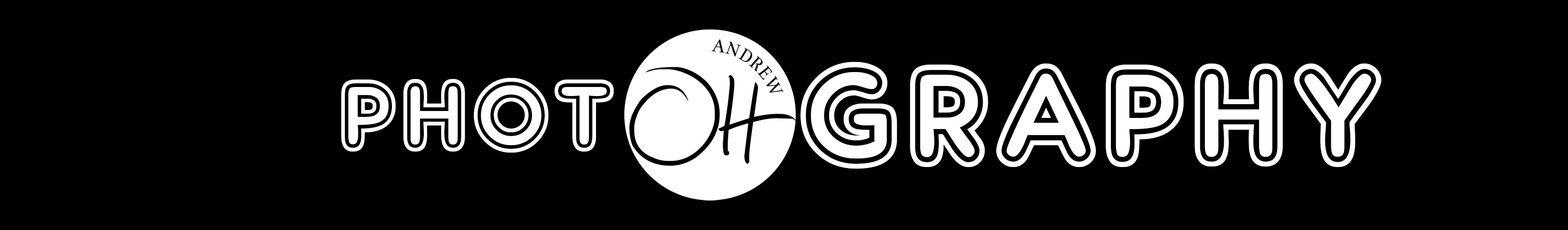
<style>
.page{position:relative;width:1568px;height:230px;background:#000000}
.page>*{position:absolute;margin:0}
.t1{font:191.6px "ARDELANEY";color:#ffffff}
.t2{font:133.7px "ARDELANEY";color:#ffffff}
</style>
<div class="page">
<p class="t1" style="left:800px;top:62px;width:581px;height:107px">graphy</p>
<p class="t2" style="left:341px;top:78px;width:273px;height:75px">phot</p>
</div>
